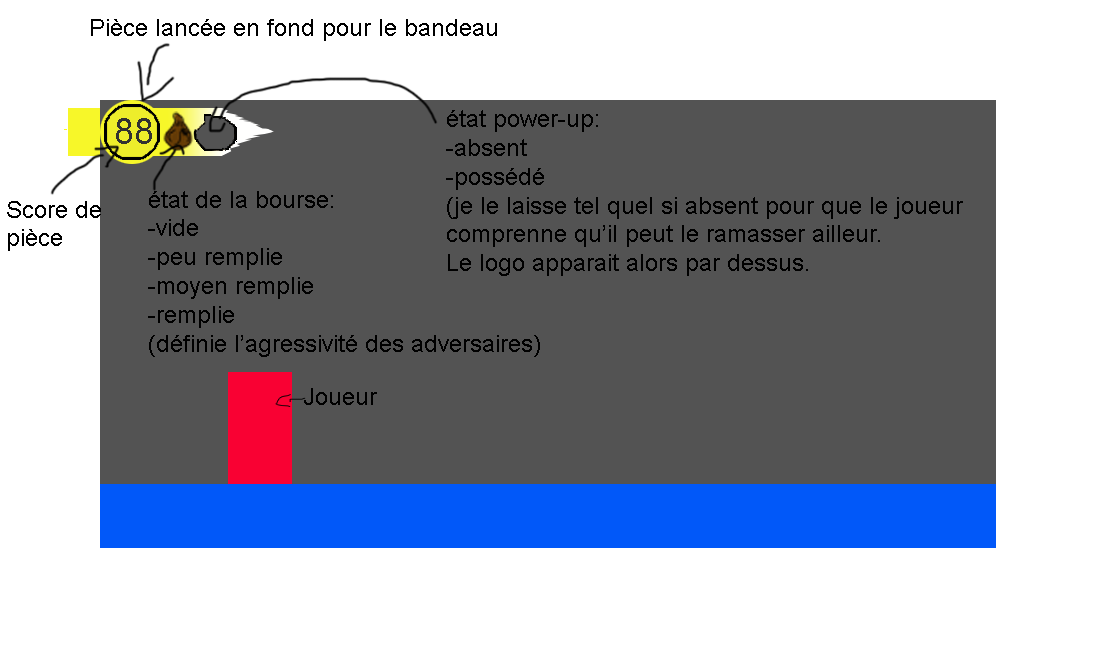
<style>
.page{position:relative;width:1096px;height:648px;background:#535353}
.page>*{position:absolute;margin:0}
.t1{font:24px "ArialMT";color:#000000}
.t2{font:36px "ArialMT";color:#313131}
</style>
<div class="page">
<p class="t1" style="left:91px;top:19px;width:406px;height:22px">Pièce lancée en fond pour le bandeau</p>
<p class="t1" style="left:446px;top:110px;width:517px;height:166px">état power-up:<br>-absent<br>-possédé<br>(je le laisse tel quel si absent pour que le joueur comprenne qu’il peut le ramasser ailleur.<br>Le logo apparait alors par dessus.</p>
<p class="t2" style="left:116px;top:118px;width:36px;height:26px">88</p>
<p class="t1" style="left:148px;top:191px;width:392px;height:166px">état de la bourse:<br>-vide<br>-peu remplie<br>-moyen remplie<br>-remplie<br>(définie l’agressivité des adversaires)</p>
<p class="t1" style="left:7px;top:201px;width:94px;height:50px">Score de pièce</p>
<p class="t1" style="left:304px;top:388px;width:73px;height:17px">Joueur</p>
</div>
